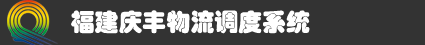
<style>
.page{position:relative;width:425px;height:45px;background:#333333}
.page>*{position:absolute;margin:0}
.t1{font:24px "STHupo";color:#ffffff}
</style>
<div class="page">
<p class="t1" style="left:71px;top:10px;width:239px;height:24px">福建庆丰物流调度系统</p>
</div>
